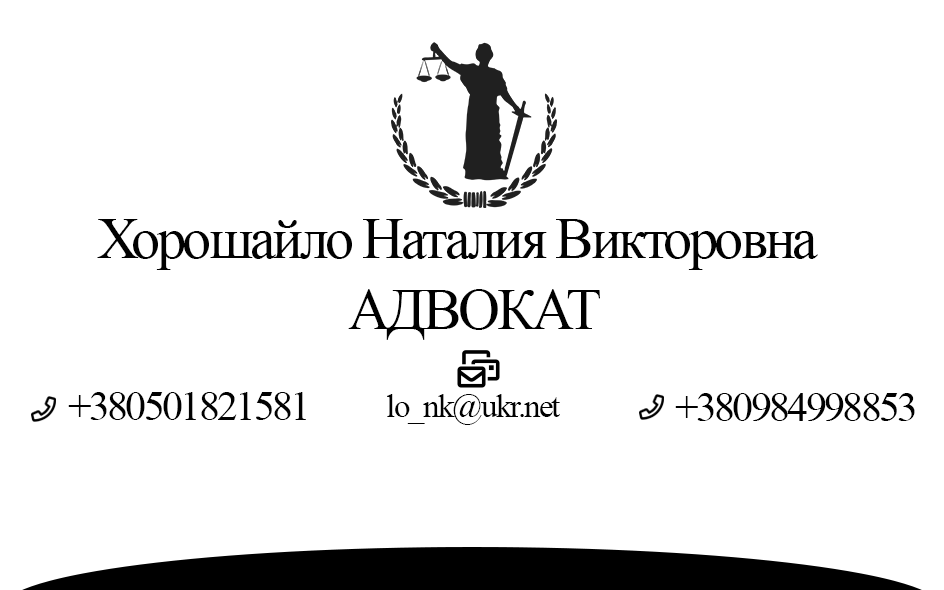
<style>
.page{position:relative;width:944px;height:590px;background:#ffffff}
.page>*{position:absolute;margin:0}
.t1{font:58.3px "TimesNewRomanPSMT";letter-spacing:-0.06em;color:#010101}
.t2{font:58.3px "TimesNewRomanPSMT";letter-spacing:-0.06em;color:#000000}
.t3{font:41.7px "TimesNewRomanPSMT";letter-spacing:-0.06em;color:#010101}
.t4{font:33.3px "TimesNewRomanPSMT";letter-spacing:-0.06em;color:#010101}
</style>
<div class="page">
<p class="t1" style="left:97px;top:219px;width:721px;height:51px">Хорошайло Наталия Викторовна</p>
<p class="t2" style="left:348px;top:289px;width:252px;height:51px">АДВОКАТ</p>
<p class="t3" style="left:68px;top:392px;width:238px;height:28px">+380501821581</p>
<p class="t4" style="left:387px;top:394px;width:173px;height:31px">lo_nk@ukr.net</p>
<p class="t3" style="left:675px;top:393px;width:240px;height:28px">+380984998853</p>
</div>
